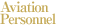
<style>
.page{position:relative;width:105px;height:27px;background:#ffffff}
.page>*{position:absolute;margin:0}
.t1{font:14px/12px "RyuminPro-ExBold";letter-spacing:-0.08em;color:#c4a956}
</style>
<div class="page">
<p class="t1" style="left:0px;top:1px;width:56px;height:24px">Aviation<br>Personnel</p>
</div>
